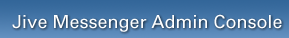
<style>
.page{position:relative;width:289px;height:38px}
.page>*{position:absolute;margin:0}
.t1{font:18px "Univers";color:#ffffff}
</style>
<div class="page">
<p class="t1" style="left:12px;top:14px;width:270px;height:18px">Jive Messenger Admin Console</p>
</div>
